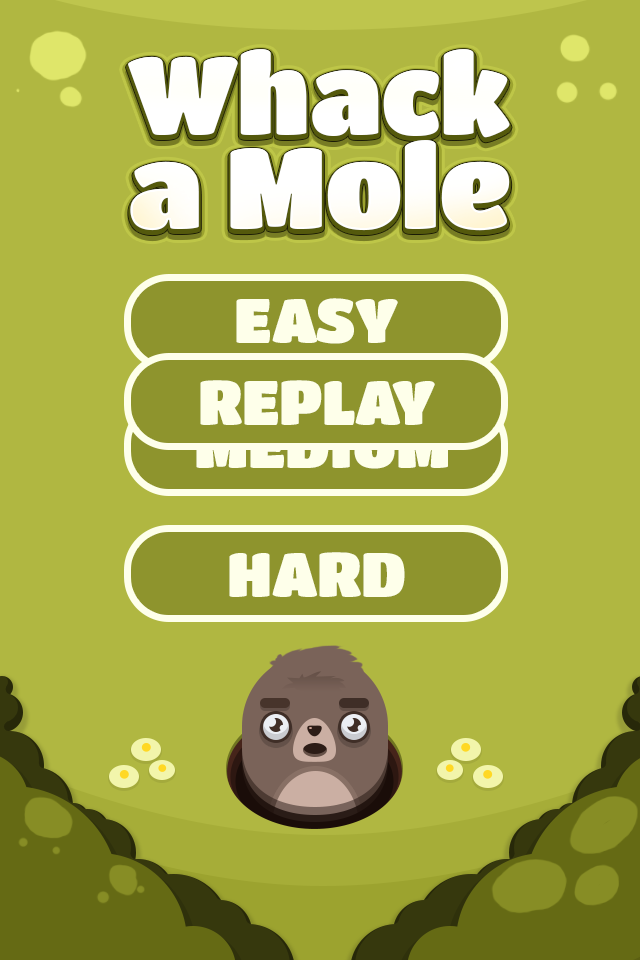
<style>
.page{position:relative;width:640px;height:960px;background:#b0b741}
.page>*{position:absolute;margin:0}
.t1{font:113.6px/94.3px "TitanOne";letter-spacing:-0.01em;color:#ffffff}
.t2{font:109.6px/91.3px "TitanOne";letter-spacing:-0.01em;color:#ffffff}
.t3{font:62px "TitanOne";letter-spacing:-0.01em;color:#feffea;text-transform:uppercase}
.t4{font:62px "TitanOne";letter-spacing:-0.01em;text-transform:uppercase}
</style>
<div class="page">
<p class="t1" style="left:128px;top:49px;width:382px;height:182px"><span class="t2">Whack <br></span>a Mole</p>
<p class="t1" style="left:128px;top:49px;width:382px;height:182px"><span class="t2">Whack <br></span>a Mole</p>
<p class="t3" style="left:236px;top:298px;width:162px;height:46px">Easy</p>
<p class="t3" style="left:200px;top:380px;width:235px;height:45px">Replay</p>
<p class="t4" style="left:196px;top:424px;width:252px;height:45px">Medium</p>
<p class="t3" style="left:229px;top:552px;width:176px;height:45px">Hard</p>
</div>
